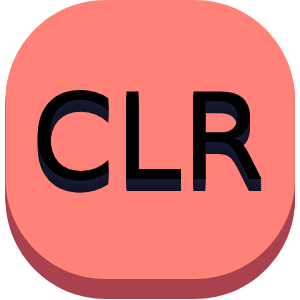
<style>
.page{position:relative;width:300px;height:300px;background:#ff8177}
.page>*{position:absolute;margin:0}
.t1{font:120px "DejaVuSans";color:#000000}
.t2{font:120px "DejaVuSans";color:#aa414e}
</style>
<div class="page">
<p class="t1" style="left:37px;top:89px;width:225px;height:92px"><span class="t2">C</span>LR</p>
</div>
